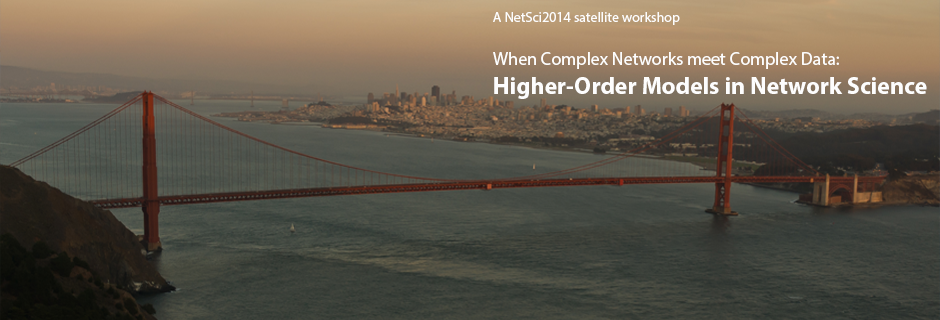
<style>
.page{position:relative;width:940px;height:320px}
.page>*{position:absolute;margin:0}
.t1{font:18px "MyriadPro-Regular";color:#fdfdfd}
.t2{font:14px "MyriadPro-Regular";color:#fdfdfd}
.t3{font:24px "MyriadPro-Bold";color:#fdfdfd}
</style>
<div class="page">
<p class="t1" style="left:493px;top:12px;width:434px;height:87px"><span class="t2">A NetSci2014 satellite workshop<br></span><br>When Complex Networks meet Complex Data: <br><span class="t3">Higher-Order Models in Network Science</span></p>
</div>
